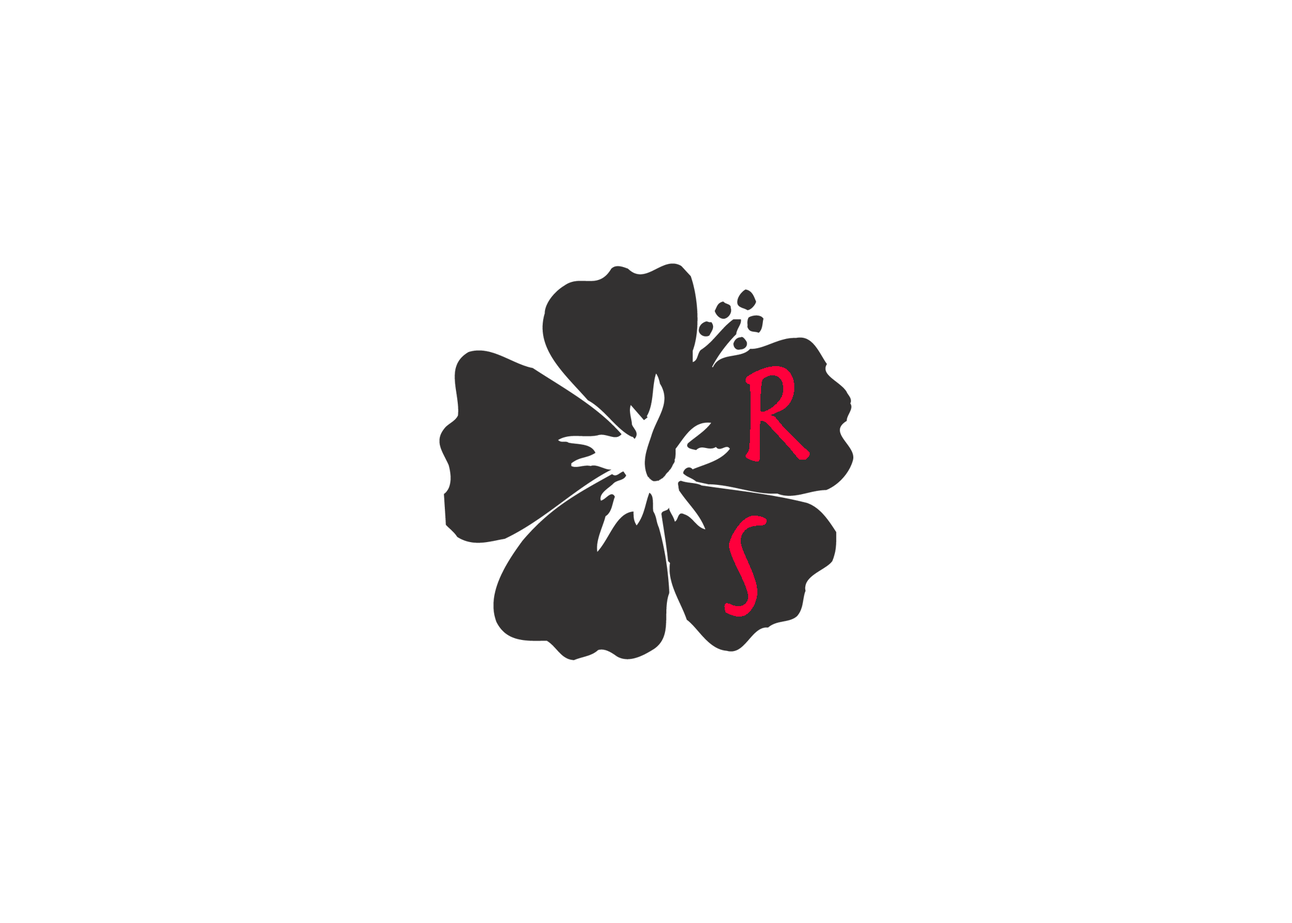
<style>
.page{position:relative;width:1292px;height:923px;background:#ffffff}
.page>*{position:absolute;margin:0}
.t1{font:153.8px "Herculanum";color:#ff003c}
</style>
<div class="page">
<p class="t1" style="left:746px;top:366px;width:64px;height:95px">R</p>
<p class="t1" style="left:724px;top:516px;width:43px;height:100px">S</p>
</div>
